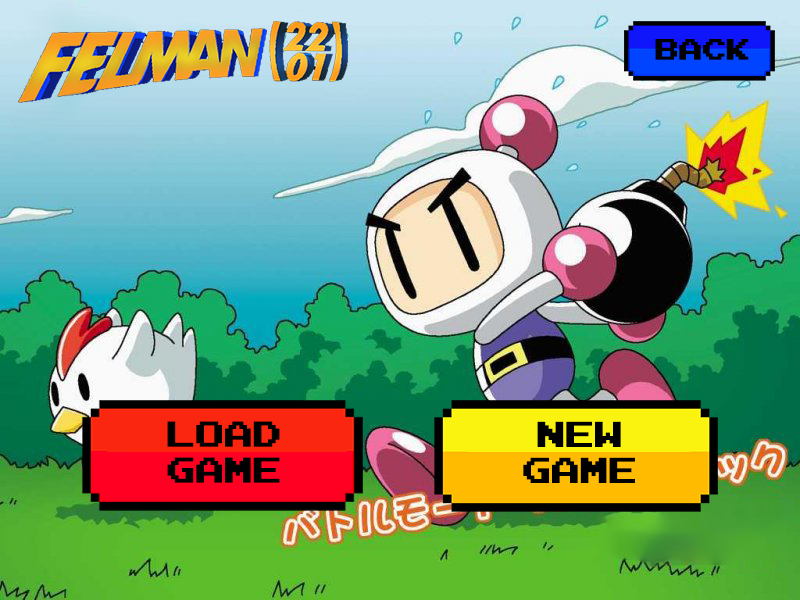
<style>
.page{position:relative;width:800px;height:600px}
.page>*{position:absolute;margin:0}
.t1{font:23.9px "ArcadeNormal";letter-spacing:-0.03em;color:#000000;font-weight:bold}
.t2{font:29px/36px "ArcadeNormal";letter-spacing:-0.03em;color:#000000;font-weight:bold}
</style>
<div class="page">
<p class="t1" style="left:655px;top:39px;width:94px;height:21px">BACK</p>
<p class="t2" style="left:167px;top:421px;width:113px;height:62px">LOAD<br>GAME</p>
<p class="t2" style="left:523px;top:421px;width:112px;height:62px;text-align:center">NEW<br>GAME</p>
</div>
